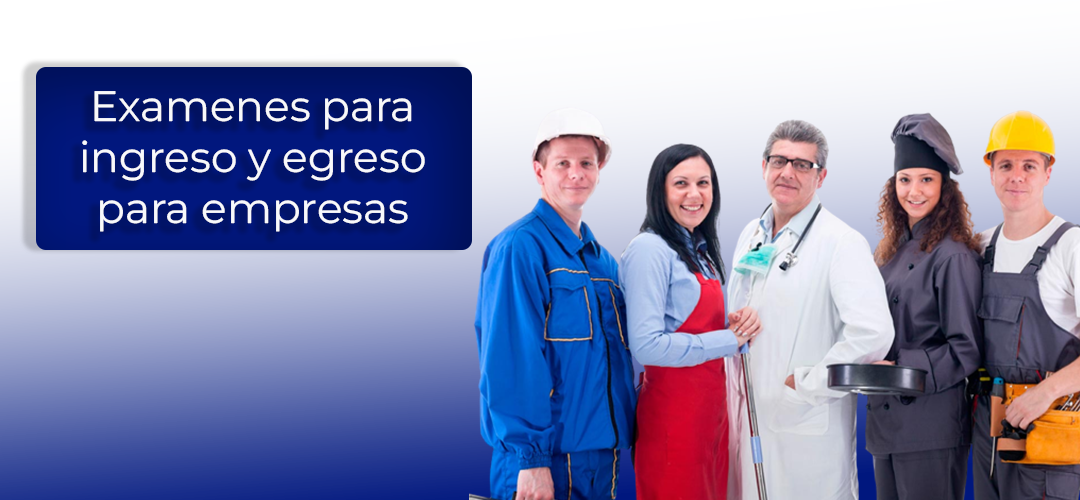
<style>
.page{position:relative;width:1080px;height:500px}
.page>*{position:absolute;margin:0}
.t1{font:42.3px "MontserratThin-Regular";color:#ffffff}
</style>
<div class="page">
<p class="t1" style="left:82px;top:91px;width:343px;height:141px;text-align:center;opacity:0.96">Examenes para <br>ingreso y egreso <br>para empresas</p>
</div>
